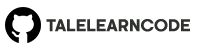
<style>
.page{position:relative;width:197px;height:52px;background:#ffffff}
.page>*{position:absolute;margin:0}
.t1{font:15.8px "Kamerik205-Regular3";color:#2f322e;text-transform:uppercase;font-weight:bold}
</style>
<div class="page">
<p class="t1" style="left:46px;top:19px;width:144px;height:13px">TaleLearnCode</p>
</div>
